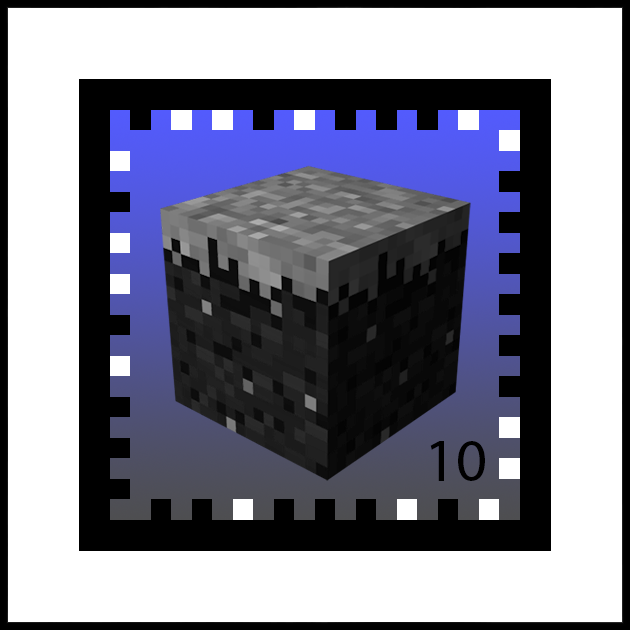
<style>
.page{position:relative;width:630px;height:630px;background:#ffffff}
.page>*{position:absolute;margin:0}
.t1{font:61.1px "MyriadPro-Regular";color:#000000;font-variant:small-caps}
</style>
<div class="page">
<p class="t1" style="left:430px;top:441px;width:55px;height:40px">10</p>
</div>
